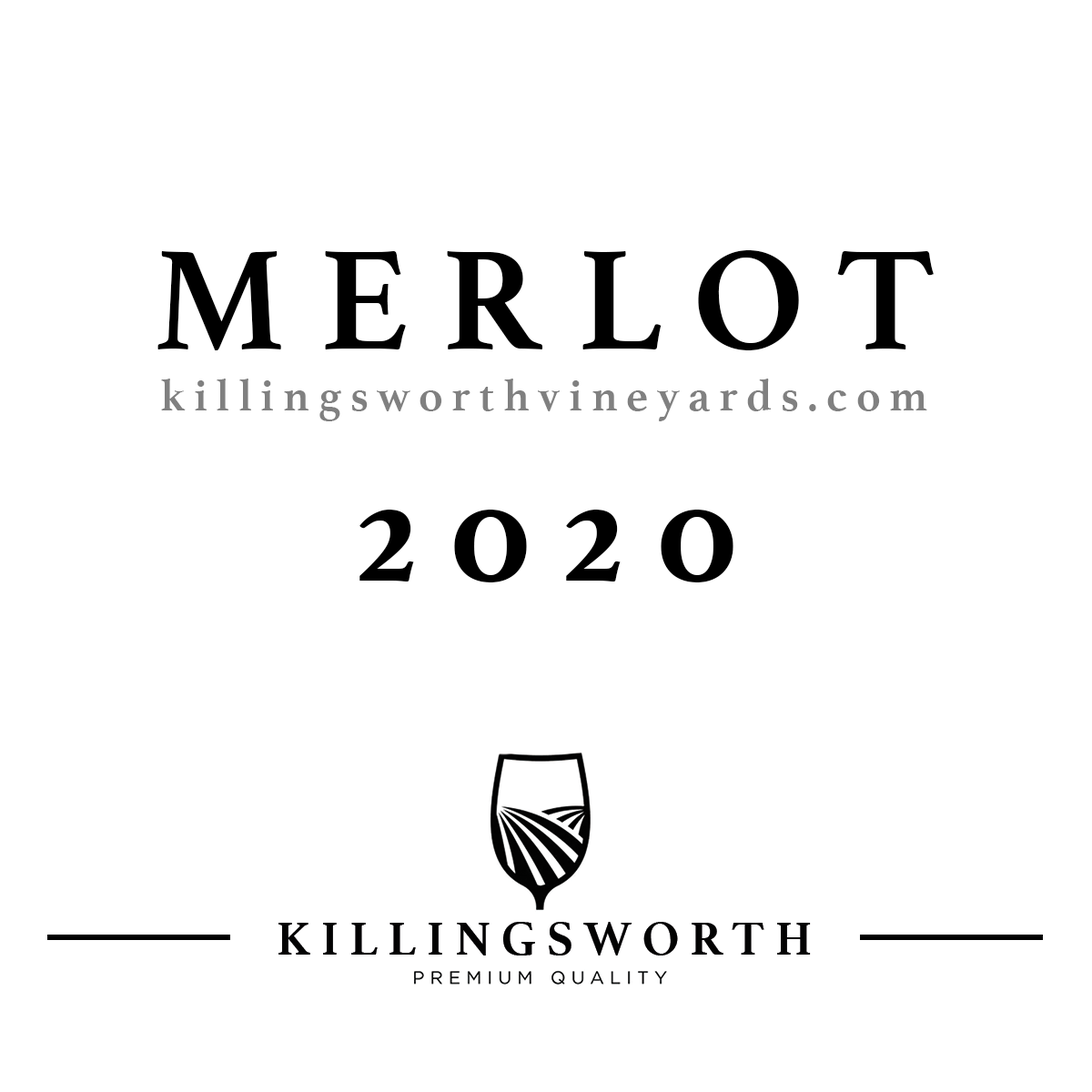
<style>
.page{position:relative;width:1092px;height:1092px;background:#ffffff}
.page>*{position:absolute;margin:0}
.t1{font:147.9px "Athelas-Bold";letter-spacing:0.22em;color:#000000}
.t2{font:45.5px "Athelas-Bold";letter-spacing:0.19em;color:#808080}
</style>
<div class="page">
<p class="t1" style="left:157px;top:250px;width:777px;height:100px">MERLOT</p>
<p class="t2" style="left:161px;top:379px;width:766px;height:42px">killingsworthvineyards.com</p>
<p class="t1" style="left:359px;top:510px;width:374px;height:72px">2020</p>
</div>
